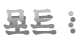
<style>
.page{position:relative;width:77px;height:40px;background:#ffffff}
.page>*{position:absolute;margin:0}
.t1{font:26.9px "SDKukdetopokki-bBd";letter-spacing:0.08em;color:#9f9c9c}
</style>
<div class="page">
<p class="t1" style="left:3px;top:8px;width:71px;height:21px">모드 :</p>
</div>
